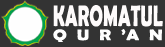
<style>
.page{position:relative;width:165px;height:47px;background:#333333}
.page>*{position:absolute;margin:0}
.t1{font:29.6px "BerlinSansFBDemi-Bold";letter-spacing:0.015em;color:#fefbfb;scale:0.61 1}
.t2{font:15.3px "BerlinSansFBDemi-Bold";letter-spacing:0.015em;color:#fefefe;scale:1.2 1}
</style>
<div class="page">
<p class="t1" style="left:53px;top:5px;width:110px;height:22px">KAROMATUL</p>
<p class="t2" style="left:53px;top:29px;width:109px;height:13px">Q  U  R  ’A  N</p>
</div>
